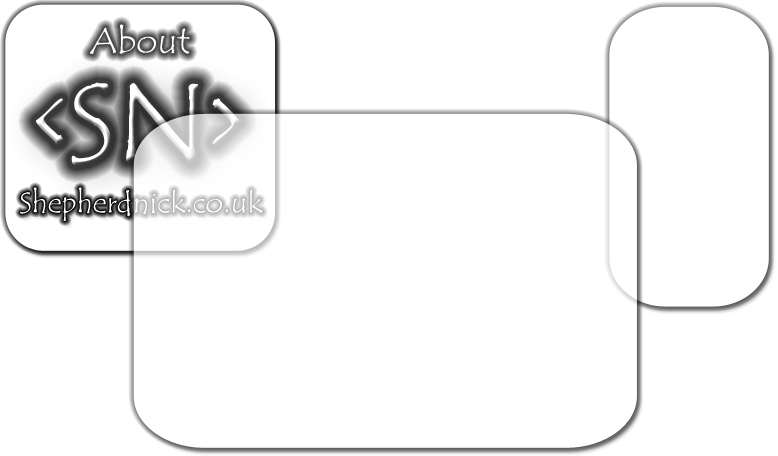
<style>
.page{position:relative;width:778px;height:456px;background:#ffffff}
.page>*{position:absolute;margin:0}
.t1{font:36px "TempusSansITC";color:#ffffff}
.t2{font:114px "TempusSansITC";color:#ffffff}
</style>
<div class="page">
<p class="t1" style="left:89px;top:24px;width:101px;height:30px;opacity:0.7">About</p>
<p class="t2" style="left:36px;top:82px;width:204px;height:83px">&lt;SN&gt;</p>
</div>
